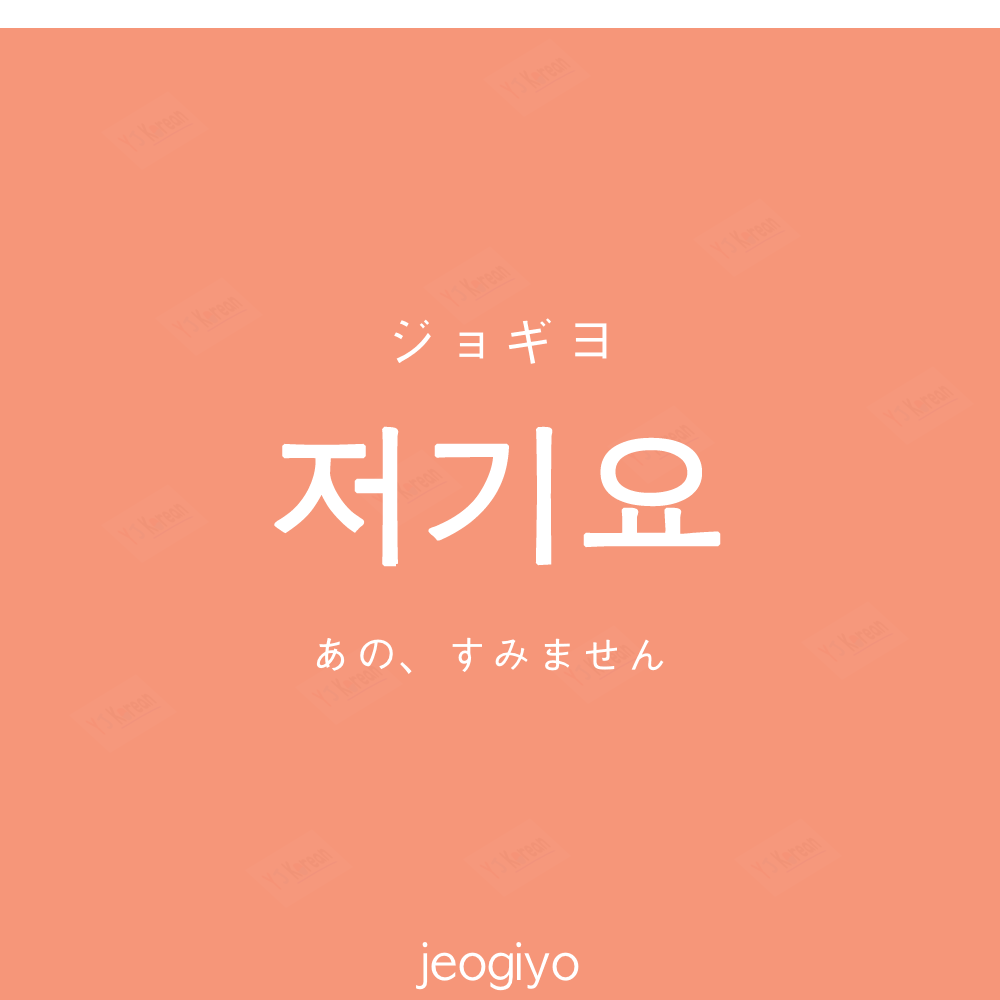
<style>
.page{position:relative;width:1000px;height:1000px;background:#f69679}
.page>*{position:absolute;margin:0}
.t1{font:60px "AppleGothic";color:#ffffff}
.t2{font:150px "AppleGothic";color:#ffffff;font-weight:bold}
.t3{font:45px "AppleGothic";color:#ffffff}
.t4{font:50px "AppleGothic";color:#ffffff}
</style>
<div class="page">
<p class="t1" style="left:394px;top:318px;width:213px;height:46px">ジョギヨ</p>
<p class="t2" style="left:274px;top:426px;width:447px;height:141px">저기요</p>
<p class="t3" style="left:316px;top:637px;width:348px;height:37px">あの、すみません</p>
<p class="t4" style="left:416px;top:942px;width:163px;height:49px">jeogiyo</p>
</div>
